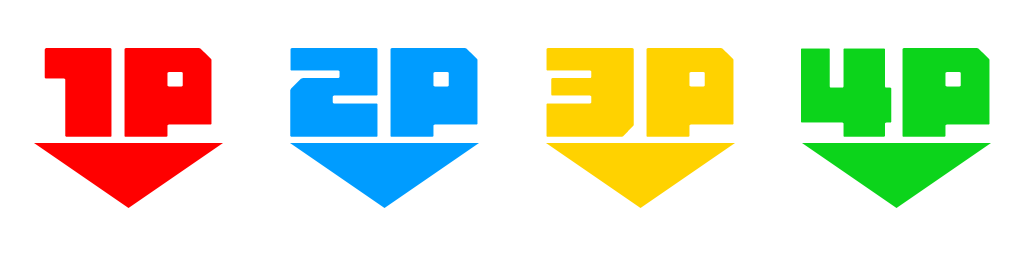
<style>
.page{position:relative;width:1024px;height:256px;background:#ffffff}
.page>*{position:absolute;margin:0}
.t1{font:100px "AB-countryroad";color:#ff0000}
.t2{font:100px "AB-countryroad";color:#009cff}
.t3{font:100px "AB-countryroad";color:#ffd200}
.t4{font:100px "AB-countryroad";color:#0cd41b}
</style>
<div class="page">
<p class="t1" style="left:44px;top:48px;width:168px;height:89px">1P</p>
<p class="t2" style="left:290px;top:48px;width:188px;height:89px">2P</p>
<p class="t3" style="left:546px;top:48px;width:188px;height:89px">3P</p>
<p class="t4" style="left:801px;top:48px;width:189px;height:89px">4P</p>
</div>
